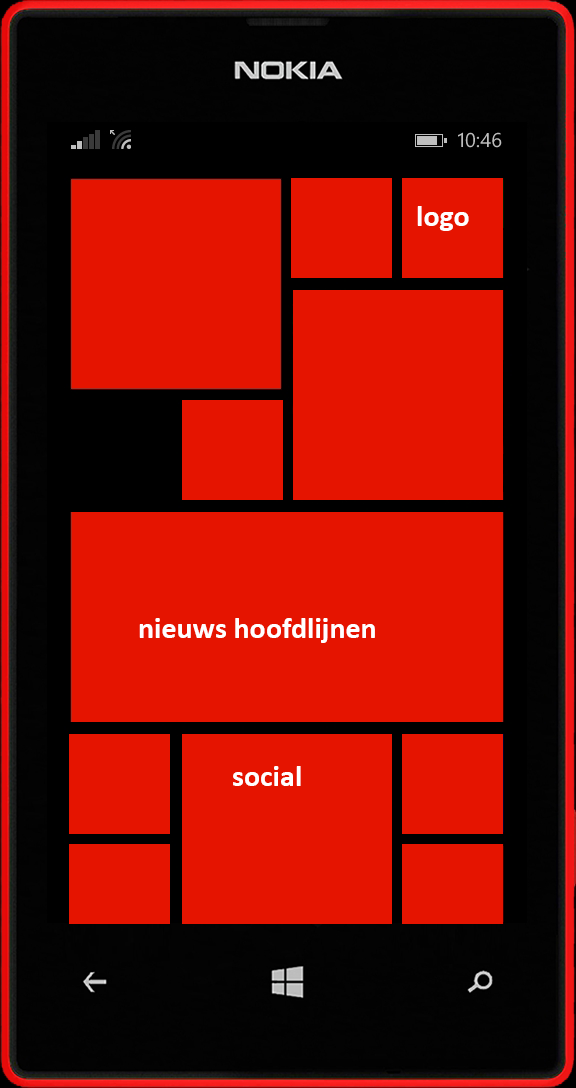
<style>
.page{position:relative;width:576px;height:1088px;background:#e51400}
.page>*{position:absolute;margin:0}
.t1{font:30px "Calibri-Bold";color:#ffffff}
</style>
<div class="page">
<p class="t1" style="left:417px;top:206px;width:52px;height:25px">logo</p>
<p class="t1" style="left:139px;top:618px;width:236px;height:25px">nieuws hoofdlijnen</p>
<p class="t1" style="left:233px;top:766px;width:68px;height:20px">social</p>
</div>
